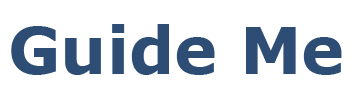
<style>
.page{position:relative;width:358px;height:103px;background:#ffffff}
.page>*{position:absolute;margin:0}
.t1{font:65px "Verdana-Bold";color:#2d4d74}
</style>
<div class="page">
<p class="t1" style="left:11px;top:24px;width:331px;height:51px">Guide Me</p>
</div>
